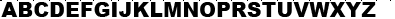
<style>
.page{position:relative;width:395px;height:19px;background:#ffffff}
.page>*{position:absolute;margin:0}
.t1{font:19.7px "Arial-Black";letter-spacing:0.03em;color:#000000;text-transform:uppercase}
</style>
<div class="page">
<p class="t1" style="left:1px;top:2px;width:375px;height:15px">ABCDEFGIJKLMNOPRSTUVWXYZ</p>
</div>
